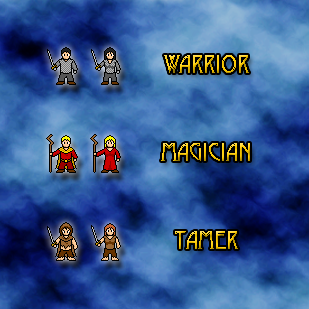
<style>
.page{position:relative;width:309px;height:309px}
.page>*{position:absolute;margin:0}
.t1{font:24px "Desdemona"}
</style>
<div class="page">
<p class="t1" style="left:164px;top:55px;width:85px;height:18px">Warrior</p>
<p class="t1" style="left:161px;top:143px;width:89px;height:18px">Magician</p>
<p class="t1" style="left:175px;top:231px;width:63px;height:18px">Tamer</p>
</div>
